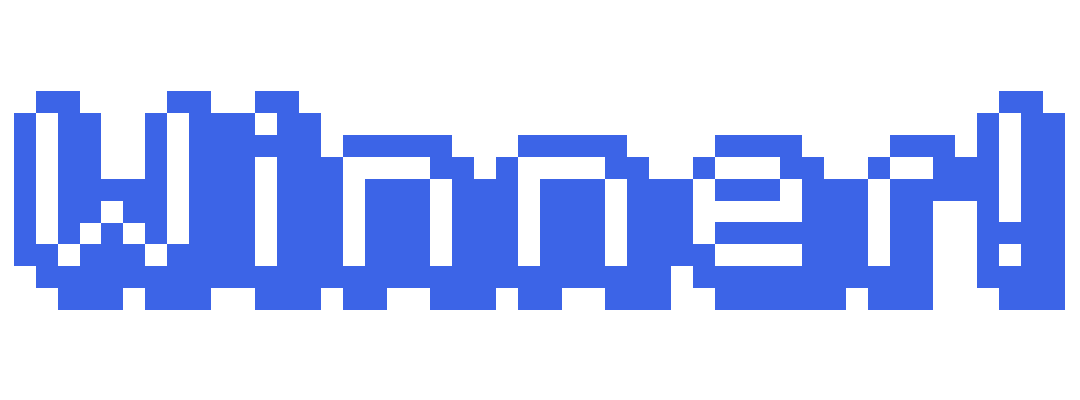
<style>
.page{position:relative;width:1080px;height:400px;background:#ffffff}
.page>*{position:absolute;margin:0}
.t1{font:175px "Fipps-Regular";color:#3c64e7}
</style>
<div class="page">
<p class="t1" style="left:14px;top:91px;width:1051px;height:219px">Winner!</p>
</div>
